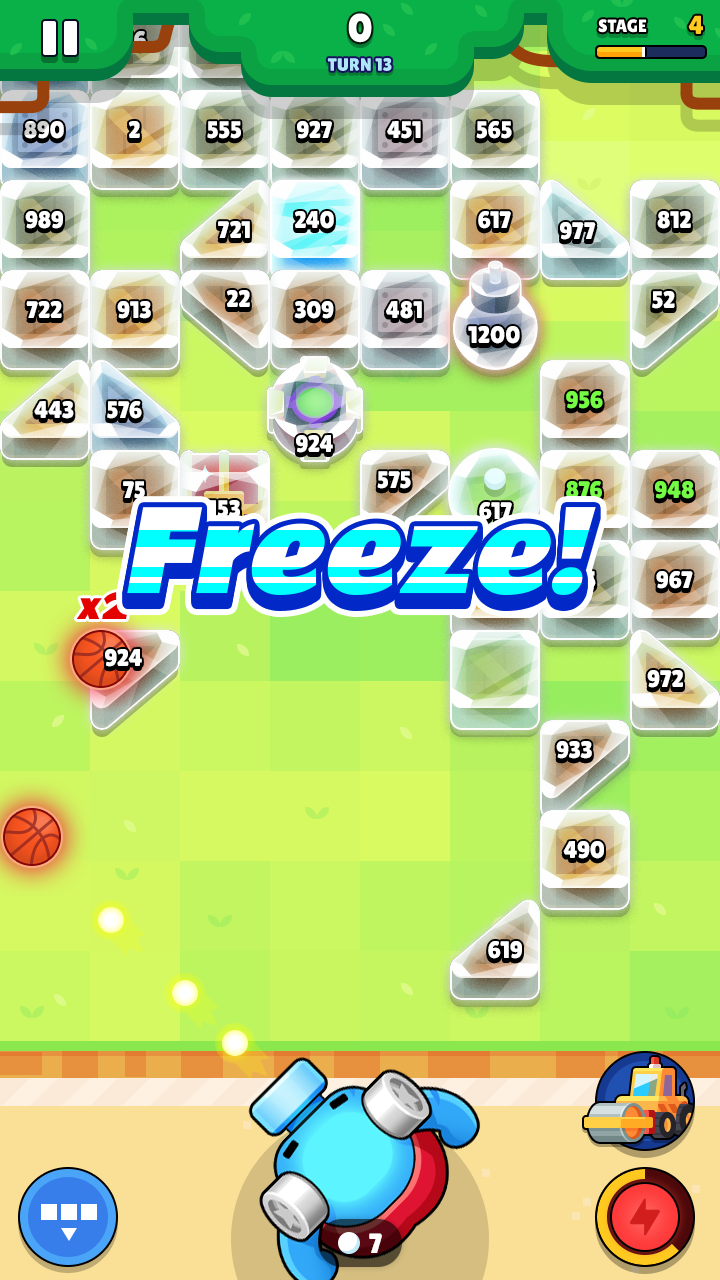
<style>
.page{position:relative;width:720px;height:1280px}
.page>*{position:absolute;margin:0}
.t1{font:24px "LilitaOne"}
.t2{font:24px "LilitaOne";color:#ffffff}
.t3{font:24px "LilitaOne";letter-spacing:0.02em;color:#ffffff}
.t4{font:24px "LilitaOne";color:#75fc45}
.t5{font:34px "RammettoOne-Regular";color:#e40200;font-style:italic}
.t6{font:28px "LilitaOne";color:#ffffff}
</style>
<div class="page">
<p class="t1" style="left:122px;top:31px;width:24px;height:18px">56</p>
<p class="t1" style="left:24px;top:121px;width:40px;height:18px">890</p>
<p class="t2" style="left:129px;top:121px;width:11px;height:17px">2</p>
<p class="t2" style="left:207px;top:121px;width:34px;height:18px">555</p>
<p class="t2" style="left:297px;top:121px;width:35px;height:18px">927</p>
<p class="t2" style="left:387px;top:121px;width:34px;height:18px">451</p>
<p class="t2" style="left:476px;top:121px;width:36px;height:18px">565</p>
<p class="t2" style="left:25px;top:211px;width:38px;height:18px">989</p>
<p class="t2" style="left:218px;top:221px;width:32px;height:17px">721</p>
<p class="t2" style="left:295px;top:211px;width:39px;height:18px">240</p>
<p class="t2" style="left:478px;top:211px;width:33px;height:18px">617</p>
<p class="t2" style="left:560px;top:222px;width:36px;height:18px">977</p>
<p class="t2" style="left:657px;top:211px;width:34px;height:18px">812</p>
<p class="t2" style="left:227px;top:290px;width:23px;height:17px">22</p>
<p class="t2" style="left:652px;top:291px;width:23px;height:18px">52</p>
<p class="t2" style="left:26px;top:301px;width:36px;height:17px">722</p>
<p class="t2" style="left:117px;top:301px;width:34px;height:18px">913</p>
<p class="t2" style="left:294px;top:301px;width:40px;height:18px">309</p>
<p class="t3" style="left:386px;top:301px;width:36px;height:18px">481</p>
<p class="t3" style="left:468px;top:326px;width:52px;height:18px">1200</p>
<p class="t2" style="left:34px;top:401px;width:40px;height:18px">443</p>
<p class="t2" style="left:107px;top:401px;width:35px;height:18px">576</p>
<p class="t4" style="left:566px;top:391px;width:37px;height:18px">956</p>
<p class="t2" style="left:296px;top:435px;width:37px;height:18px">924</p>
<p class="t2" style="left:377px;top:471px;width:34px;height:18px">575</p>
<p class="t2" style="left:123px;top:481px;width:22px;height:18px">75</p>
<p class="t4" style="left:566px;top:481px;width:36px;height:18px">876</p>
<p class="t4" style="left:655px;top:481px;width:39px;height:18px">948</p>
<p class="t2" style="left:207px;top:500px;width:33px;height:18px">153</p>
<p class="t2" style="left:479px;top:502px;width:33px;height:18px">617</p>
<p class="t1" style="left:573px;top:571px;width:23px;height:18px">25</p>
<p class="t2" style="left:656px;top:571px;width:37px;height:18px">967</p>
<p class="t5" style="left:76px;top:591px;width:54px;height:28px">x2</p>
<p class="t2" style="left:105px;top:649px;width:37px;height:18px">924</p>
<p class="t2" style="left:647px;top:670px;width:36px;height:18px">972</p>
<p class="t2" style="left:556px;top:741px;width:36px;height:18px">933</p>
<p class="t2" style="left:563px;top:841px;width:41px;height:18px">490</p>
<p class="t2" style="left:488px;top:941px;width:34px;height:18px">619</p>
<p class="t6" style="left:369px;top:1233px;width:13px;height:20px">7</p>
</div>
